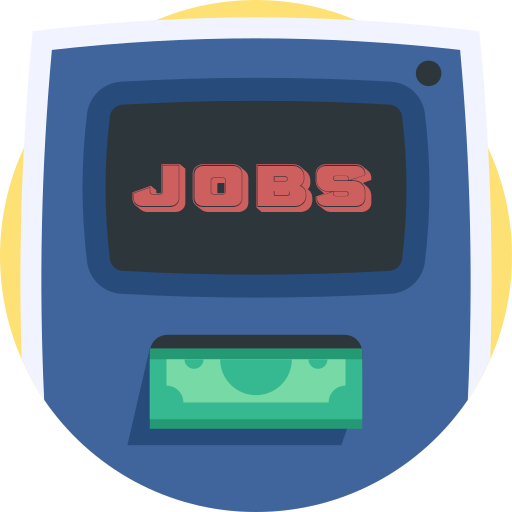
<style>
.page{position:relative;width:512px;height:512px;background:#40649c}
.page>*{position:absolute;margin:0}
.t1{font:70px "Barber-Complete";color:#ce5f5f}
</style>
<div class="page">
<p class="t1" style="left:132px;top:164px;width:240px;height:48px">Jobs</p>
</div>
